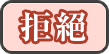
<style>
.page{position:relative;width:109px;height:54px;background:#ffdad5}
.page>*{position:absolute;margin:0}
.t1{font:32px "RyuminPr6N-ExBold";letter-spacing:0.075em;color:#ffffff}
</style>
<div class="page">
<p class="t1" style="left:20px;top:11px;width:66px;height:31px">拒絕</p>
</div>
